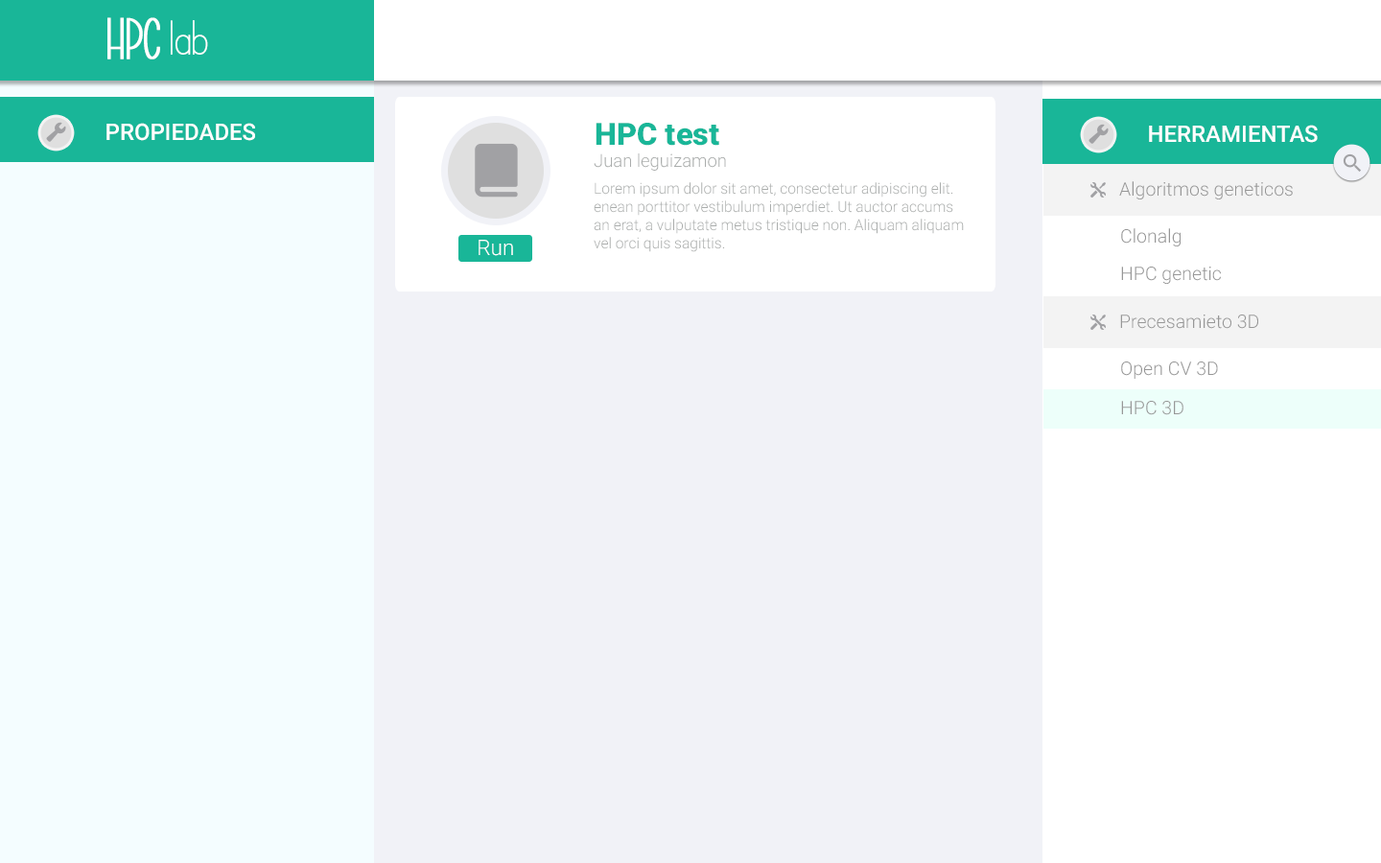
<style>
.page{position:relative;width:1381px;height:863px;background:#f1f2f7}
.page>*{position:absolute;margin:0}
.t1{font:58.4px "BriocheauPotiron";color:#ffffff;font-weight:bold}
.t2{font:58.4px "BriocheauPotiron";color:#ffffff}
.t3{font:23px "Roboto-Medium";color:#ffffff}
.t4{font:30.7px "Roboto-Black";color:#19b698}
.t5{font:17.9px "Roboto-Light";color:#aaadac}
.t6{font:15px "Roboto-Light";color:#aaadac}
.t7{font:18.7px "Roboto-Light";color:#979797}
.t8{font:21.6px "Roboto-Light";color:#ffffff}
</style>
<div class="page">
<p class="t1" style="left:107px;top:17px;width:101px;height:42px">HPC<span class="t2"> lab</span></p>
<p class="t3" style="left:106px;top:123px;width:149px;height:18px">PROPIEDADES</p>
<p class="t4" style="left:596px;top:123px;width:123px;height:23px">HPC test</p>
<p class="t3" style="left:1149px;top:125px;width:169px;height:18px">HERRAMIENTAS</p>
<p class="t5" style="left:594px;top:153px;width:132px;height:18px">Juan leguizamon</p>
<p class="t6" style="left:594px;top:182px;width:370px;height:70px">Lorem ipsum dolor sit amet, consectetur adipiscing elit.<br>enean porttitor vestibulum imperdiet. Ut auctor accums<br>an erat, a vulputate metus tristique non. Aliquam aliquam <br>vel orci quis sagittis.</p>
<p class="t7" style="left:1119px;top:181px;width:174px;height:19px">Algoritmos geneticos</p>
<p class="t7" style="left:1121px;top:228px;width:60px;height:19px">Clonalg</p>
<p class="t8" style="left:479px;top:240px;width:34px;height:16px">Run</p>
<p class="t7" style="left:1121px;top:267px;width:100px;height:17px">HPC genetic</p>
<p class="t7" style="left:1120px;top:315px;width:138px;height:14px">Precesamieto 3D</p>
<p class="t7" style="left:1121px;top:362px;width:97px;height:17px">Open CV 3D</p>
<p class="t7" style="left:1121px;top:401px;width:63px;height:14px">HPC 3D</p>
</div>
